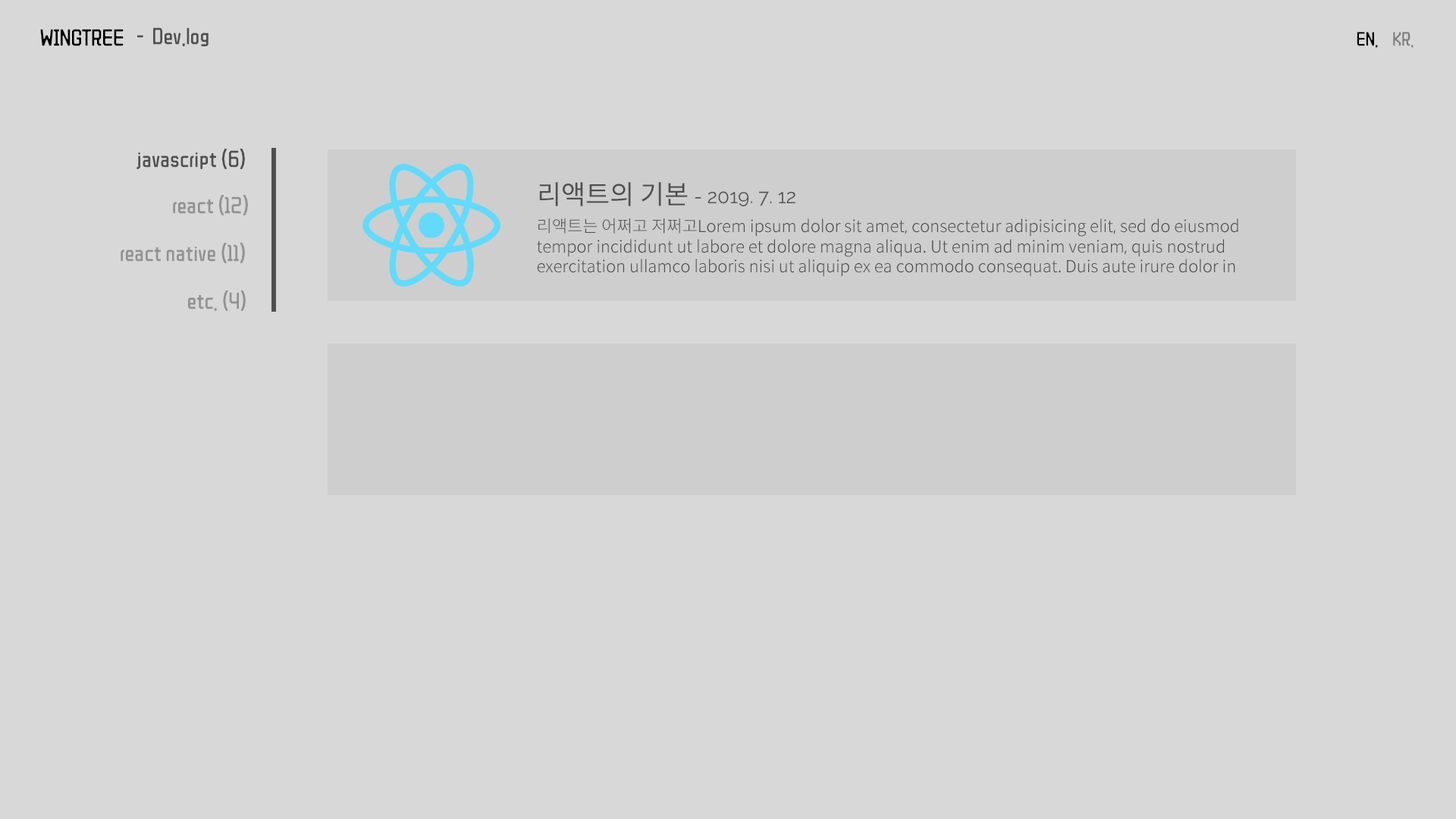
<style>
.page{position:relative;width:1456px;height:819px;background:#d8d8d8}
.page>*{position:absolute;margin:0}
.t1{font:22.7px "ZCOOLQingKeHuangYou-Regular";color:#000000}
.t2{font:22.7px "ZCOOLQingKeHuangYou-Regular";color:#505050}
.t3{font:19px "ZCOOLQingKeHuangYou-Regular";color:#000000}
.t4{font:19px "ZCOOLQingKeHuangYou-Regular";color:#808080}
.t5{font:26.5px "SpoqaHanSans-Regular";color:#505050}
.t6{font:22.7px "ZCOOLQingKeHuangYou-Regular";color:#929292}
.t7{font:19.7px "Raleway-Regular";color:#505050}
.t8{font:16.7px "SpoqaHanSans-Light";color:#505050}
</style>
<div class="page">
<p class="t1" style="left:40px;top:29px;width:84px;height:17px">WINGTREE</p>
<p class="t2" style="left:137px;top:27px;width:72px;height:19px">-  Dev.log</p>
<p class="t3" style="left:1357px;top:32px;width:57px;height:16px">EN.    <span class="t4">KR.</span></p>
<p class="t2" style="left:136px;top:149px;width:109px;height:20px">javascript (6)</p>
<p class="t5" style="left:539px;top:182px;width:149px;height:24px">리액트의 기본</p>
<p class="t6" style="left:173px;top:195px;width:75px;height:20px">react (12)</p>
<p class="t7" style="left:695px;top:191px;width:100px;height:15px">- 2019. 7. 12</p>
<p class="t8" style="left:537px;top:218px;width:701px;height:59px">리액트는 어쩌고 저쩌고Lorem ipsum dolor sit amet, consectetur adipisicing elit, sed do eiusmod tempor incididunt ut labore et dolore magna aliqua. Ut enim ad minim veniam, quis nostrud exercitation ullamco laboris nisi ut aliquip ex ea commodo consequat. Duis aute irure dolor in</p>
<p class="t6" style="left:121px;top:243px;width:124px;height:20px">react native (11)</p>
<p class="t6" style="left:188px;top:290px;width:58px;height:21px">etc. (4)</p>
</div>
